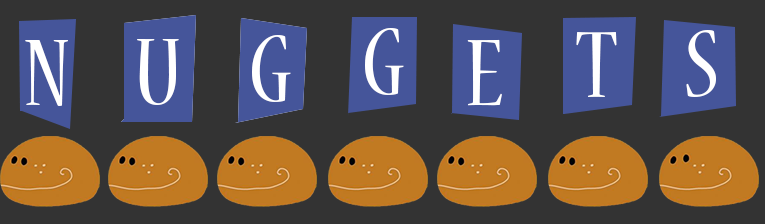
<style>
.page{position:relative;width:765px;height:224px;background:#333333}
.page>*{position:absolute;margin:0}
.t1{font:105px "NuevaStd-Cond";color:#ffffff}
</style>
<div class="page">
<p class="t1" style="left:365px;top:28px;width:39px;height:67px">G</p>
<p class="t1" style="left:686px;top:30px;width:30px;height:67px">S</p>
<p class="t1" style="left:25px;top:40px;width:43px;height:66px">N</p>
<p class="t1" style="left:137px;top:39px;width:42px;height:66px">U</p>
<p class="t1" style="left:252px;top:35px;width:39px;height:67px">G</p>
<p class="t1" style="left:467px;top:39px;width:35px;height:67px">E</p>
<p class="t1" style="left:576px;top:32px;width:41px;height:65px">T</p>
</div>
